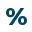
<style>
.page{position:relative;width:32px;height:32px;background:#ffffff}
.page>*{position:absolute;margin:0}
.t1{font:24px "Montserrat-ExtraBold";letter-spacing:0.04em;color:#004466}
</style>
<div class="page">
<p class="t1" style="left:6px;top:8px;width:21px;height:17px">%</p>
</div>
